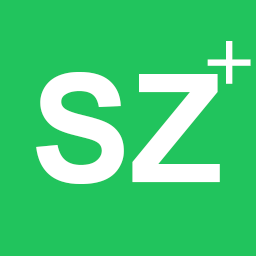
<style>
.page{position:relative;width:256px;height:256px;background:#21c45d}
.page>*{position:absolute;margin:0}
.t1{font:80px "BrushScriptMT";color:#ffffff}
.t2{font:150px "Arial-BoldMT";color:#ffffff}
</style>
<div class="page">
<p class="t1" style="left:207px;top:41px;width:44px;height:43px">+</p>
<p class="t2" style="left:36px;top:72px;width:184px;height:112px">SZ</p>
</div>
